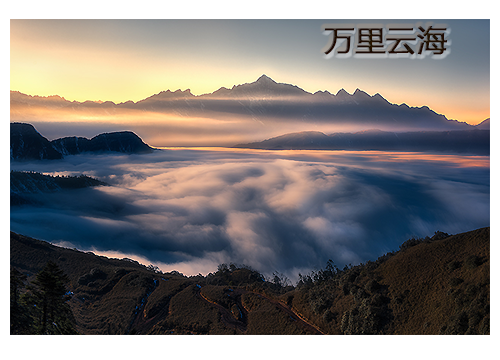
<style>
.page{position:relative;width:500px;height:360px}
.page>*{position:absolute;margin:0}
.t1{font:30px "MicrosoftYaHei";font-weight:bold}
</style>
<div class="page">
<p class="t1" style="left:324px;top:26px;width:123px;height:29px">万里云海</p>
</div>
